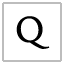
<style>
.page{position:relative;width:64px;height:64px;background:#ffffff}
.page>*{position:absolute;margin:0}
.t1{font:36px "IowanOldStyle-Roman";color:#000000}
</style>
<div class="page">
<p class="t1" style="left:16px;top:16px;width:34px;height:33px">Q</p>
</div>
